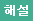
<style>
.page{position:relative;width:33px;height:21px;background:#43ae91}
.page>*{position:absolute;margin:0}
.t1{font:12px "Dotum";color:#ffffff;font-weight:bold}
</style>
<div class="page">
<p class="t1" style="left:4px;top:5px;width:24px;height:11px">해설</p>
</div>
